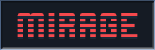
<style>
.page{position:relative;width:155px;height:50px;background:#151b24}
.page>*{position:absolute;margin:0}
.t1{font:36px "Cornerstone"}
</style>
<div class="page">
<p class="t1" style="left:17px;top:13px;width:121px;height:26px">Mirage</p>
</div>
